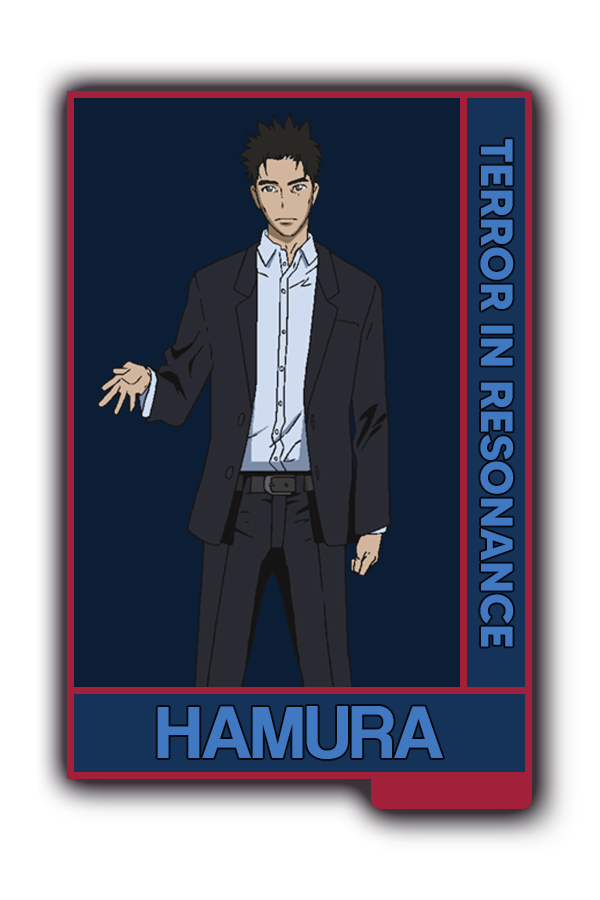
<style>
.page{position:relative;width:600px;height:900px;background:#0c1e35}
.page>*{position:absolute;margin:0}
.t1{font:45.2px "MADETOMMY-Bold";color:#4079c2}
.t2{font:77px "CoolveticaRg-Regular";color:#4079c2}
</style>
<div class="page">
<p class="t1" style="left:480px;top:139px;width:34px;height:508px;rotate:90deg">TERROR IN RESONANCE</p>
<p class="t2" style="left:157px;top:706px;width:286px;height:53px">HAMURA</p>
</div>
